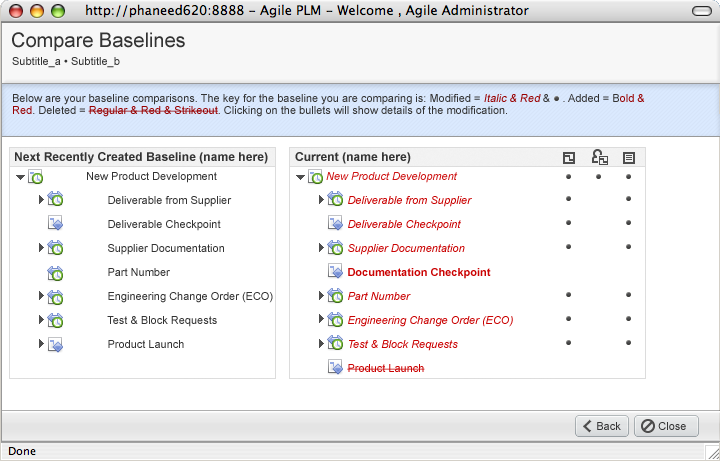
<style>
.page{position:relative;width:720px;height:461px;background:#ffffff}
.page>*{position:absolute;margin:0}
.t1{font:20px "ArialMT";color:#333333}
.t2{font:11px "ArialMT";color:#333333}
.t3{font:11px/12px "ArialMT";color:#333333}
.t4{font:11px/12px "ArialMT";color:#990000;font-style:italic}
.t5{font:11px/12px "ArialMT";color:#990000}
.t6{font:12px "Arial-BoldMT";letter-spacing:0.005em;color:#333333}
.t7{font:11px/24px "ArialMT";color:#333333}
.t8{font:11px/24px "Arial-BoldMT";color:#333333}
.t9{font:11px/24px "Arial-ItalicMT";color:#ca0202}
.t10{font:11px/24px "Arial-ItalicMT";color:#ce1313}
.t11{font:11px/24px "Arial-BoldMT";color:#ca0202}
.t12{font:11px/24px "ArialMT";color:#ca0202}
</style>
<div class="page">
<p class="t1" style="left:12px;top:32px;width:173px;height:19px">Compare Baselines</p>
<p class="t2" style="left:12px;top:57px;width:108px;height:11px">Subtitle_a • Subtitle_b</p>
<p class="t3" style="left:13px;top:94px;width:632px;height:23px">Below are your baseline comparisons. The key for the baseline you are comparing is: Modified = <span class="t4">Italic &amp; Red</span> &amp;    . Added = B<span class="t5">old &amp;<br>Red</span>. Deleted = <span class="t5">Regular &amp; Red &amp; Strikeout</span>. Clicking on the bullets will show details of the modification.</p>
<p class="t6" style="left:15px;top:152px;width:253px;height:12px">Next Recently Created Baseline (name here)</p>
<p class="t6" style="left:295px;top:152px;width:116px;height:12px">Current (name here)</p>
<p class="t7" style="left:87px;top:172px;width:186px;height:176px"><span class="t8"><br></span>New Product Development<br>       Deliverable from Supplier<br>       Deliverable Checkpoint<br>       Supplier Documentation<br>       Part Number<br>       Engineering Change Order (ECO)<br>       Test &amp; Block Requests<br>       Product Launch</p>
<p class="t9" style="left:326px;top:172px;width:187px;height:200px"><span class="t8"><br></span><span class="t10">New Product Development<br>       </span>Deliverable from Supplier<br>       Deliverable Checkpoint<br>       Supplier Documentation<br>       <span class="t11">Documentation Checkpoint<br></span>       Part Number<br>       Engineering Change Order (ECO)<br>       Test &amp; Block Requests<br>       <span class="t12">Product Launch</span></p>
<p class="t2" style="left:597px;top:422px;width:24px;height:8px">Back</p>
<p class="t2" style="left:658px;top:422px;width:28px;height:8px">Close</p>
</div>
